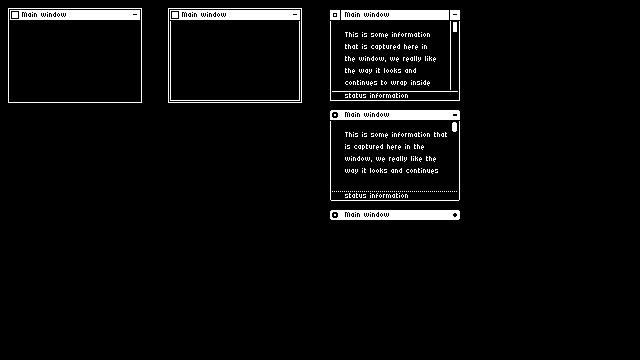
<style>
.page{position:relative;width:640px;height:360px;background:#000000}
.page>*{position:absolute;margin:0}
.t1{font:11px "Micro5-Regular";color:#000000}
.t2{font:11px/12px "Micro5-Regular";color:#ffffff}
.t3{font:11px "Micro5-Regular";color:#ffffff}
</style>
<div class="page">
<p class="t1" style="left:22px;top:12px;width:44px;height:5px">Main window</p>
<p class="t1" style="left:182px;top:12px;width:44px;height:5px">Main window</p>
<p class="t1" style="left:345px;top:12px;width:44px;height:5px">Main window</p>
<p class="t1" style="left:345px;top:12px;width:44px;height:5px">Main window</p>
<p class="t2" style="left:345px;top:32px;width:91px;height:54px">This is some information <br>that is captured here in <br>the window, we really like <br>the way it looks and <br>continues to wrap inside</p>
<p class="t2" style="left:345px;top:32px;width:91px;height:54px">This is some information <br>that is captured here in <br>the window, we really like <br>the way it looks and <br>continues to wrap inside</p>
<p class="t3" style="left:345px;top:93px;width:63px;height:5px">status information</p>
<p class="t3" style="left:345px;top:93px;width:63px;height:5px">status information</p>
</div>
